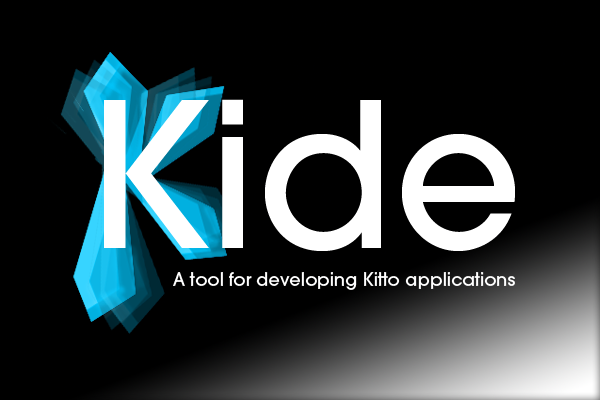
<style>
.page{position:relative;width:600px;height:400px;background:#000000}
.page>*{position:absolute;margin:0}
.t1{font:200px "AvantGarde-Medium";color:#ffffff}
.t2{font:18px "AvantGarde-Medium";color:#ffffff}
</style>
<div class="page">
<p class="t1" style="left:104px;top:99px;width:411px;height:152px">Kide</p>
<p class="t2" style="left:173px;top:272px;width:342px;height:18px">A tool for developing Kitto applications</p>
</div>
